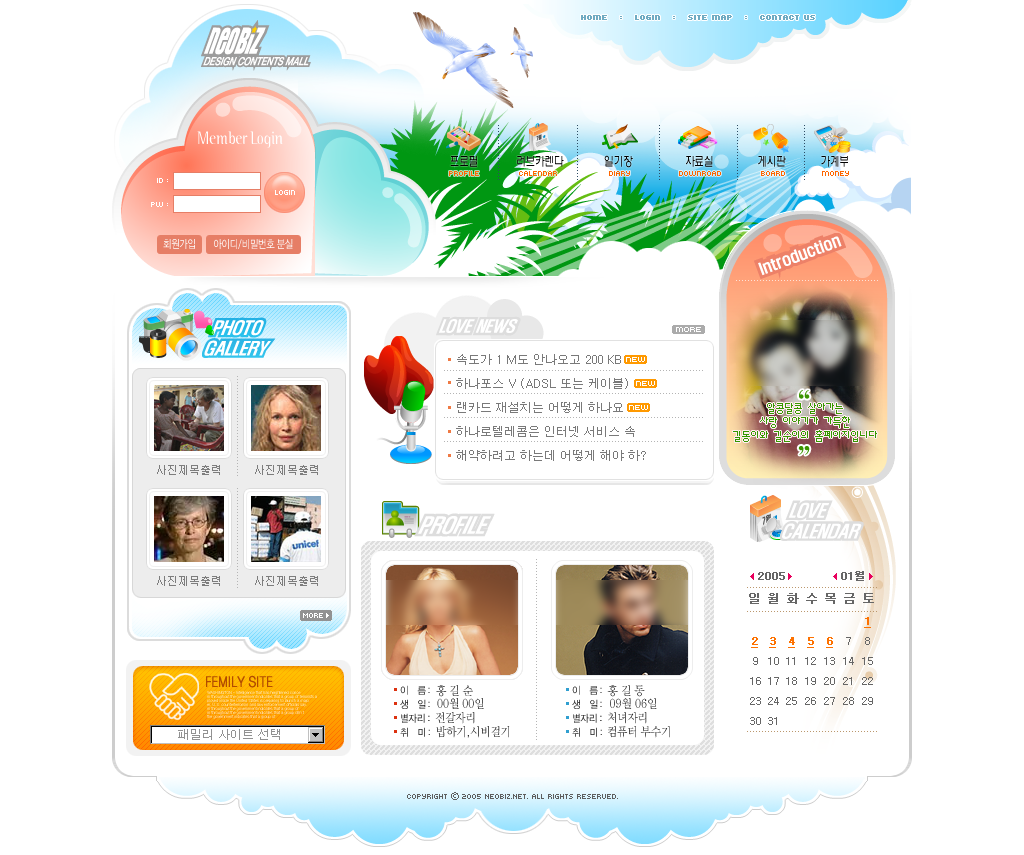
<style>
.page{position:relative;width:1024px;height:855px;background:#ffffff}
.page>*{position:absolute;margin:0}
.t1{font:8px "Kroeger0555";color:#6fabc2;font-weight:bold}
.t2{font:18px "BinaryITCTTLight";color:#ffffff;scale:0.8 1}
.t3{font:13px "H2wulL";letter-spacing:-0.025em;color:#000000;scale:0.75 1}
.t4{font:8px "Kroeger0555";color:#ff6600}
.t5{font:8px/24px "Kroeger0555";color:#ffffff}
.t6{font:8px "Kroeger0555";color:#ffffff}
.t7{font:11px "YDIWebDotum";color:#ffffff;scale:0.8 1}
.t8{font:12px/24px "Dotum";color:#797979}
.t9{font:36px/14px "YDIWebBatan";color:#3b9400}
.t10{font:12px/14px "Á¤9";color:#359700}
.t11{font:14px "YDIWebDotum";color:#b24c00;font-weight:bold;scale:0.83 1}
.t12{font:10px/14px "YDIWebDotum";scale:0.9 1}
.t13{font:10px/14px "YDIWebDotum";scale:0.92 1}
.t14{font:10px/14px "YDIWebDotum";scale:0.97 1}
.t15{font:10px/14px "YDIWebDotum";scale:0.91 1}
.t16{font:12px "YDIWebBatan";scale:0.9 1}
.t17{font:12px "YDIWebBatan";color:#1d1d1d;scale:0.9 1}
.t18{font:12px "Dotum";color:#919191}
.t19{font:8px "Kroeger0555";color:#5d5d5d}
.t20{font:8px "YDIWebDotum";color:#5d5d5d}
</style>
<div class="page">
<p class="t1" style="left:581px;top:15px;width:234px;height:5px">Home   :   login   :   Site map   :   Contact us</p>
<p class="t2" style="left:197px;top:131px;width:86px;height:17px">Member Login</p>
<p class="t3" style="left:450px;top:155px;width:398px;height:13px">프로필             러브카렌다              일기장                  자료실               게시판            가계부</p>
<p class="t4" style="left:449px;top:171px;width:400px;height:5px">profile             calendar                 diary                downroad             board            money</p>
<p class="t5" style="left:151px;top:178px;width:17px;height:29px;text-align:right">id :<br>pw :</p>
<p class="t6" style="left:275px;top:190px;width:20px;height:5px">login</p>
<p class="t7" style="left:163px;top:239px;width:130px;height:10px">회원가입        아이디/비밀번호 분실</p>
<p class="t8" style="left:456px;top:354px;width:190px;height:107px">속도가 1 M도 안나오고 200 KB <br>하나포스 V (ADSL 또는 케이블)<br>랜카드 재설치는 어떻게 하나요<br>하나로텔레콤은 인터넷 서비스 속<br>해약하려고 하는데 어떻게 해야 하?</p>
<p class="t9" style="left:798px;top:390px;width:12px;height:65px;text-align:center">“<br><br><br><br>”</p>
<p class="t10" style="left:733px;top:403px;width:144px;height:39px;text-align:center">알콩달콩 살아가는 <br>사랑 이야기가 가득한<br>길동이와 길순이의 홈페이지입니다</p>
<p class="t11" style="left:206px;top:675px;width:67px;height:13px">FEMILY SITE</p>
<p class="t12" style="left:400px;top:685px;width:30px;height:52px">이    름 : <br>생    일 :<br>별자<span class="t13">리</span><span class="t14"> :<br></span><span class="t15">취    미 :</span></p>
<p class="t16" style="left:436px;top:685px;width:209px;height:12px">홍 길 순                                          홍 길 동</p>
<p class="t12" style="left:572px;top:685px;width:30px;height:52px">이    름 : <br>생    일 :<br>별자<span class="t13">리</span><span class="t14"> :<br></span><span class="t15">취    미 :</span></p>
<p class="t16" style="left:437px;top:698px;width:220px;height:11px">00월 00일                                       09월 06일</p>
<p class="t17" style="left:435px;top:712px;width:212px;height:12px">전갈자리                                         처녀자리</p>
<p class="t17" style="left:436px;top:726px;width:234px;height:12px">밥하기,시비걸기                              컴퓨터 부수기</p>
<p class="t18" style="left:178px;top:729px;width:102px;height:11px">패밀리 사이트 선택</p>
<p class="t19" style="left:407px;top:792px;width:211px;height:8px">Copyright <span class="t20">ⓒ</span> 2005 NEOBIZ.NET. All rights reserved.</p>
</div>
